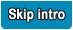
<style>
.page{position:relative;width:73px;height:30px;background:#008aba}
.page>*{position:absolute;margin:0}
.t1{font:14px "ArialNarrow-Bold";color:#ffffff;font-weight:bold}
</style>
<div class="page">
<p class="t1" style="left:8px;top:8px;width:57px;height:14px">Skip intro</p>
</div>
